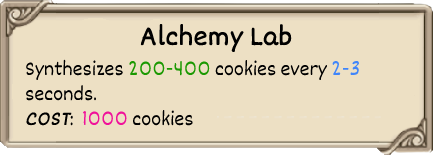
<style>
.page{position:relative;width:433px;height:155px;background:#ede0c4}
.page>*{position:absolute;margin:0}
.t1{font:29px "Dekko";color:#000000;font-weight:bold}
.t2{font:21px "Dekko";color:#000000}
.t3{font:21px "Dekko";color:#1b9902}
.t4{font:21px "Dekko";color:#4086fa}
.t5{font:21px "Dekko";color:#000000;font-weight:bold;font-style:italic}
.t6{font:21px "Dekko";color:#f0129a}
</style>
<div class="page">
<p class="t1" style="left:140px;top:23px;width:152px;height:30px">Alchemy Lab</p>
<p class="t2" style="left:26px;top:59px;width:333px;height:67px">Synthesizes <span class="t3">200-400 </span>cookies every <span class="t4">2-3<br></span>seconds.<br><span class="t5">COST</span>:  <span class="t6">1000 </span>cookies</p>
</div>
